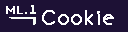
<style>
.page{position:relative;width:128px;height:32px;background:#1d1135}
.page>*{position:absolute;margin:0}
.t1{font:10px "BonvenoCF-Light";letter-spacing:0.005em;color:#ffffff;font-weight:bold}
.t2{font:18px "BonvenoCF-Light";letter-spacing:0.005em;color:#ffffff;font-weight:bold}
</style>
<div class="page">
<p class="t1" style="left:6px;top:6px;width:17px;height:8px">ML</p>
<p class="t2" style="left:42px;top:10px;width:72px;height:15px">Cookie</p>
</div>
